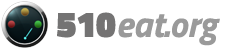
<style>
.page{position:relative;width:240px;height:50px;background:#ffffff}
.page>*{position:absolute;margin:0}
.t1{font:36px "TitilliumWeb-BoldItalic";color:#9a9a9a}
.t2{font:36px "TitilliumWeb-Black";color:#747373}
</style>
<div class="page">
<p class="t1" style="left:57px;top:12px;width:163px;height:34px"><span class="t2">510</span>eat.org</p>
</div>
